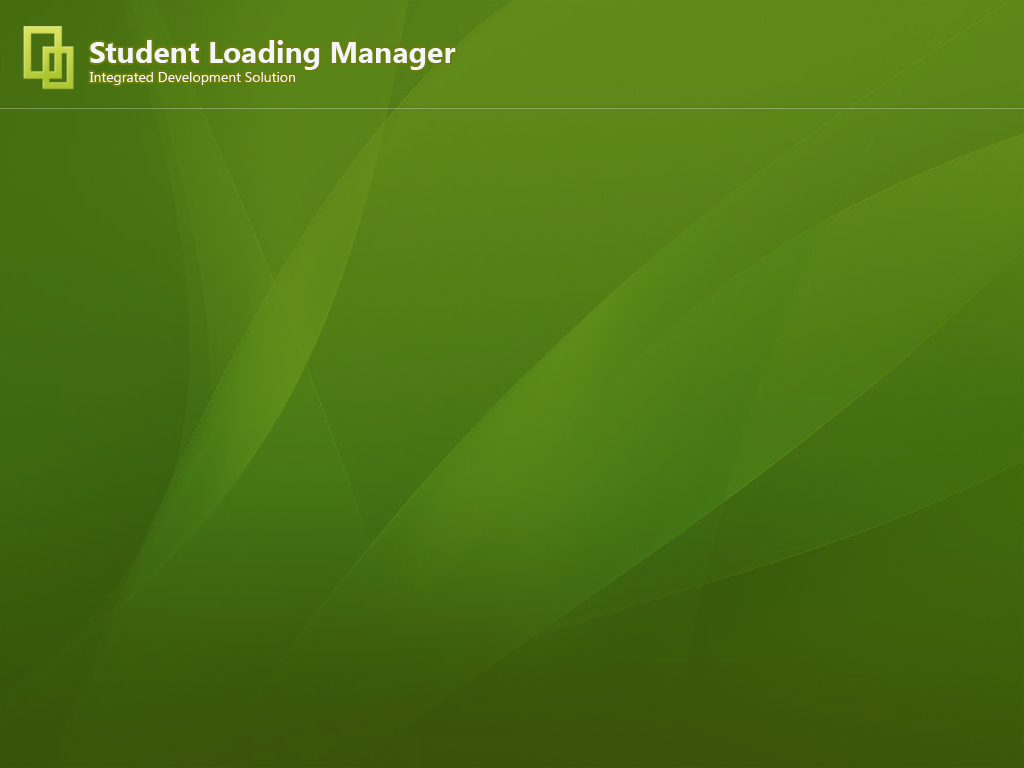
<style>
.page{position:relative;width:1024px;height:768px}
.page>*{position:absolute;margin:0}
.t1{font:30px "SegoeUI-Bold";color:#f4f5f8}
.t2{font:14px "SegoeUI";color:#f4f5f8}
</style>
<div class="page">
<p class="t1" style="left:90px;top:40px;width:366px;height:30px">Student Loading Manager</p>
<p class="t2" style="left:90px;top:72px;width:205px;height:13px">Integrated Development Solution</p>
</div>
